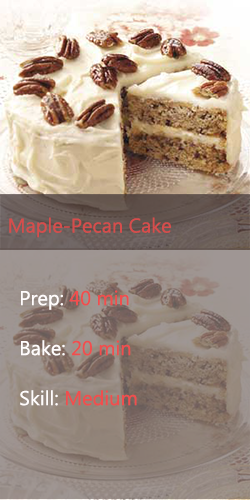
<style>
.page{position:relative;width:250px;height:500px}
.page>*{position:absolute;margin:0}
.t1{font:20px "MicrosoftTaiLe";color:#d64d4c}
.t2{font:20px/50px "MicrosoftTaiLe";color:#f14e4e}
.t3{font:20px/50px "MicrosoftTaiLe";color:#fffcfc}
</style>
<div class="page">
<p class="t1" style="left:9px;top:217px;width:162px;height:21px">Maple-Pecan Cake</p>
<p class="t2" style="left:20px;top:290px;width:117px;height:116px"><span class="t3">Prep:</span> 40 min<br><span class="t3">Bake:</span> 20 min<br><span class="t3">Skill:</span> Medium</p>
</div>
